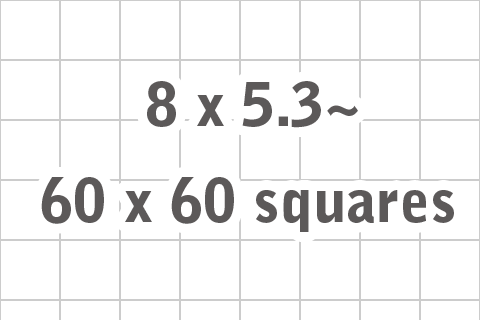
<style>
.page{position:relative;width:480px;height:320px;background:#ffffff}
.page>*{position:absolute;margin:0}
.t1{font:60px "BellGothicStd-Black";color:#5c5959}
</style>
<div class="page">
<p class="t1" style="left:147px;top:81px;width:211px;height:47px">8 x 5.3~</p>
<p class="t1" style="left:41px;top:177px;width:413px;height:55px">60 x 60 squares</p>
</div>
